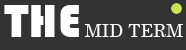
<style>
.page{position:relative;width:186px;height:50px;background:#333333}
.page>*{position:absolute;margin:0}
.t1{font:48px "Bauhaus93";color:#ffffff}
.t2{font:18px "Century";color:#ffffff}
</style>
<div class="page">
<p class="t1" style="left:4px;top:5px;width:75px;height:32px">THE</p>
<p class="t2" style="left:84px;top:24px;width:99px;height:13px">MID TERM</p>
</div>
